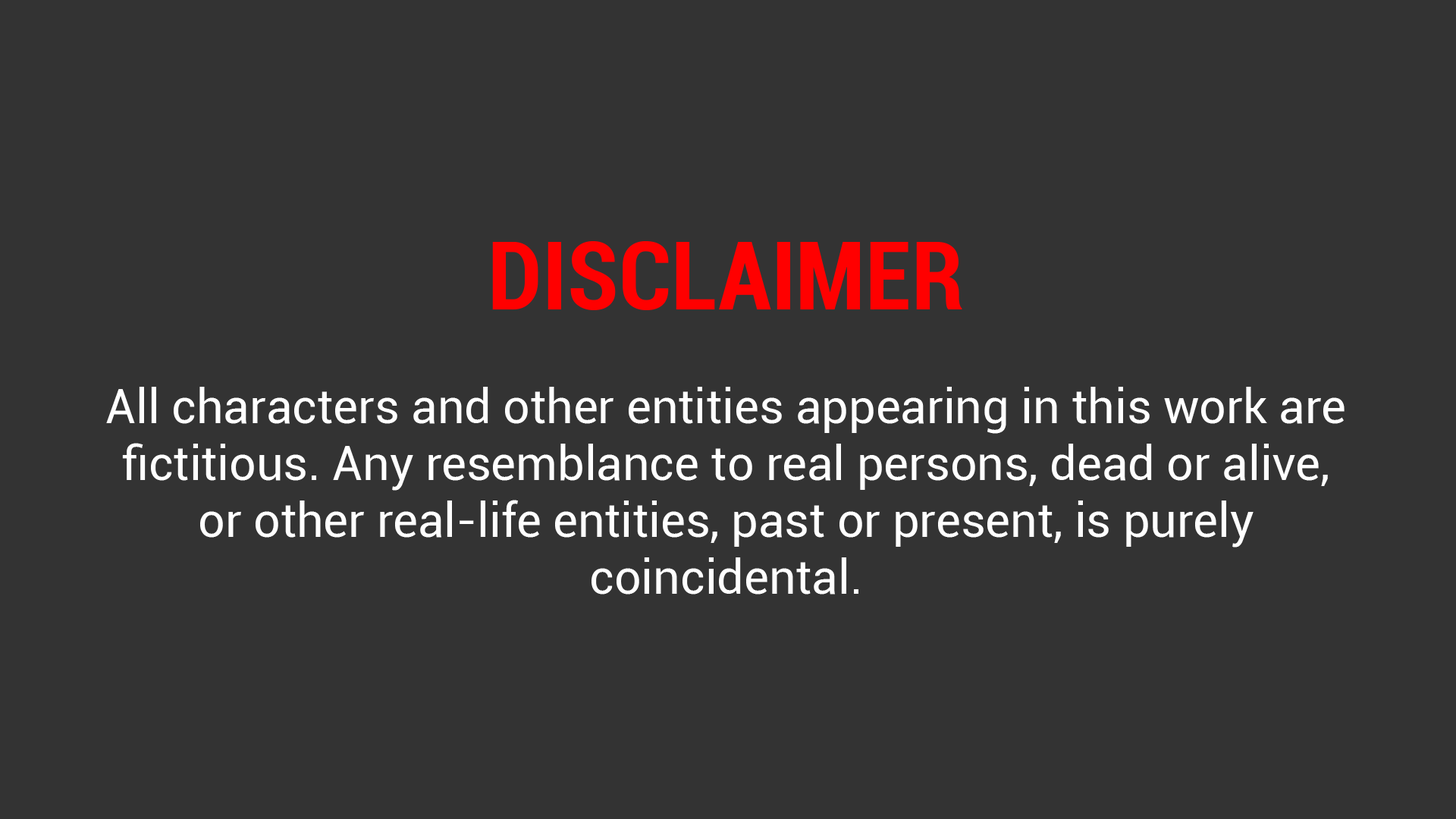
<style>
.page{position:relative;width:1456px;height:819px;background:#333333}
.page>*{position:absolute;margin:0}
.t1{font:47.5px "Roboto-Regular";color:#ffffff}
.t2{font:95px "Roboto-BoldCondensed";color:#ff0000}
</style>
<div class="page">
<p class="t1" style="left:106px;top:241px;width:1239px;height:354px;text-align:center"><span class="t2"><br><br>DISCLAIMER<br><br></span>All characters and other entities appearing in this work are fictitious. Any resemblance to real persons, dead or alive, or other real-life entities, past or present, is purely coincidental.</p>
</div>
